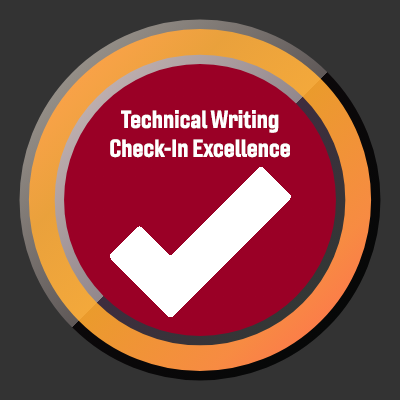
<style>
.page{position:relative;width:400px;height:400px;background:#333333}
.page>*{position:absolute;margin:0}
.t1{font:24px "Gineso-ConBol";color:#ffffff}
</style>
<div class="page">
<p class="t1" style="left:110px;top:110px;width:180px;height:48px;text-align:center">Technical Writing<br>Check-In Excellence</p>
</div>
